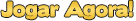
<style>
.page{position:relative;width:136px;height:21px;background:#ffffff}
.page>*{position:absolute;margin:0}
.t1{font:19px "BorisBlackBloxx";color:#f9d459}
.t2{font:20px "BorisBlackBloxx";color:#f9d459}
</style>
<div class="page">
<p class="t1" style="left:1px;top:0px;width:132px;height:20px">Jogar Agora<span class="t2">!</span></p>
</div>
